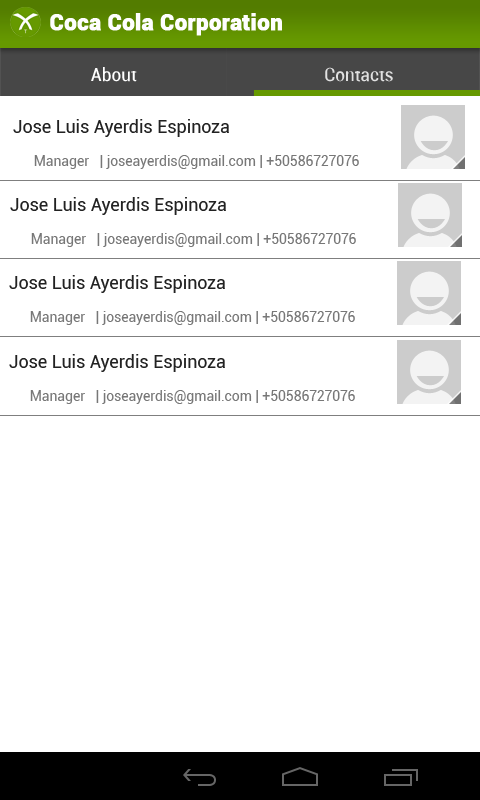
<style>
.page{position:relative;width:480px;height:800px;background:#ffffff}
.page>*{position:absolute;margin:0}
.t1{font:22px "Roboto-Black";color:#fefefe;font-weight:bold}
.t2{font:18px "Roboto-Condensed";color:#ffffff;scale:1.1 1}
.t3{font:18px "Roboto-Condensed";color:#e1e1e1;scale:1.1 1}
.t4{font:18px "Roboto-Regular";color:#222222}
.t5{font:14px "Roboto-Regular";color:#777777}
</style>
<div class="page">
<p class="t1" style="left:50px;top:13px;width:232px;height:23px">Coca Cola Corporation</p>
<p class="t2" style="left:91px;top:67px;width:46px;height:15px">About</p>
<p class="t3" style="left:325px;top:67px;width:68px;height:15px">Contacts</p>
<p class="t4" style="left:13px;top:119px;width:216px;height:18px">Jose Luis Ayerdis Espinoza</p>
<p class="t5" style="left:34px;top:155px;width:325px;height:14px">Manager   | joseayerdis@gmail.com | +50586727076</p>
<p class="t4" style="left:10px;top:197px;width:216px;height:18px">Jose Luis Ayerdis Espinoza</p>
<p class="t5" style="left:31px;top:233px;width:325px;height:14px">Manager   | joseayerdis@gmail.com | +50586727076</p>
<p class="t4" style="left:9px;top:275px;width:216px;height:18px">Jose Luis Ayerdis Espinoza</p>
<p class="t5" style="left:30px;top:311px;width:325px;height:14px">Manager   | joseayerdis@gmail.com | +50586727076</p>
<p class="t4" style="left:9px;top:354px;width:216px;height:18px">Jose Luis Ayerdis Espinoza</p>
<p class="t5" style="left:30px;top:390px;width:325px;height:14px">Manager   | joseayerdis@gmail.com | +50586727076</p>
</div>
